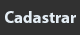
<style>
.page{position:relative;width:80px;height:35px;background:#313131}
.page>*{position:absolute;margin:0}
.t1{font:16.7px "MyriadPro-Bold";color:#e3ecf3}
</style>
<div class="page">
<p class="t1" style="left:5px;top:11px;width:71px;height:12px">Cadastrar</p>
</div>
